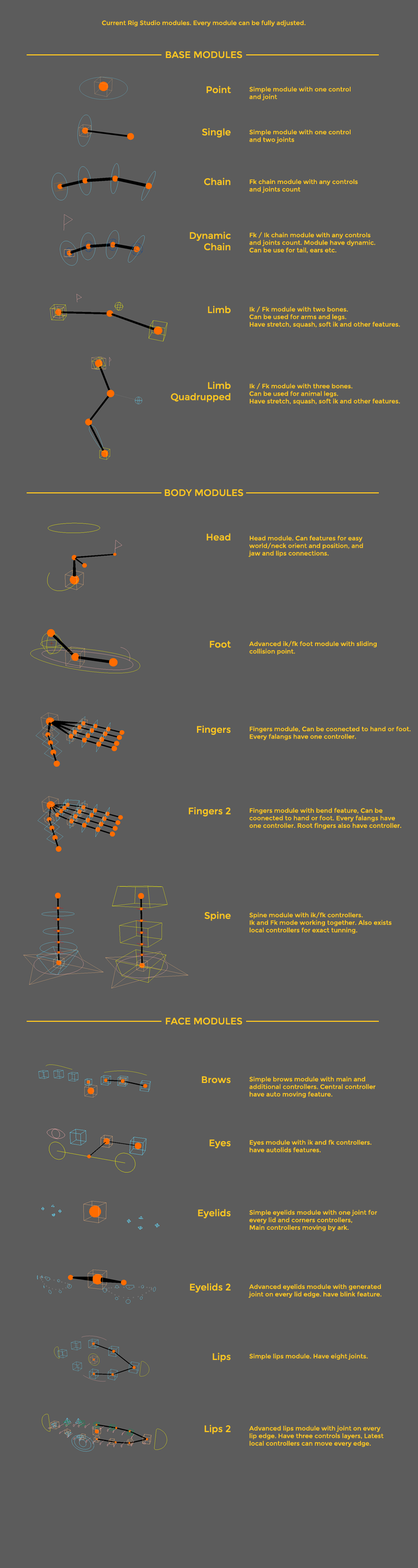
<style>
.page{position:relative;width:418px;height:1568px;background:#5c5c5c}
.page>*{position:absolute;margin:0}
.t1{font:6.3px "Montserrat-Regular";color:#ffc820}
.t2{font:9.4px "Montserrat-Regular";color:#ffc820}
</style>
<div class="page">
<p class="t1" style="left:102px;top:20px;width:204px;height:7px">Current Rig Studio modules. Every module can be fully adjusted.</p>
<p class="t2" style="left:166px;top:51px;width:77px;height:8px">BASE MODULES</p>
<p class="t2" style="left:206px;top:86px;width:25px;height:8px">Point</p>
<p class="t1" style="left:249px;top:86px;width:102px;height:14px">Simple module with one control <br>and joint</p>
<p class="t2" style="left:202px;top:128px;width:29px;height:9px">Single</p>
<p class="t1" style="left:249px;top:129px;width:102px;height:14px">Simple module with one control <br>and two joints</p>
<p class="t2" style="left:204px;top:178px;width:26px;height:8px">Chain</p>
<p class="t1" style="left:249px;top:179px;width:109px;height:14px">Fk chain module with any controls<br>and joints count</p>
<p class="t2" style="left:190px;top:232px;width:41px;height:18px;text-align:right">Dynamic<br>Chain</p>
<p class="t1" style="left:249px;top:232px;width:127px;height:21px">Fk / Ik chain module with any controls<br>and joints count. Module have dynamic.<br>Can be use for tail, ears etc.</p>
<p class="t2" style="left:208px;top:306px;width:23px;height:8px">Limb</p>
<p class="t1" style="left:249px;top:306px;width:151px;height:22px">Ik / Fk module with two bones. <br>Can be used for arms and legs.<br>Have stretch, squash, soft ik and other features.</p>
<p class="t2" style="left:171px;top:382px;width:60px;height:20px;text-align:right">Limb<br>Quadrupped</p>
<p class="t1" style="left:249px;top:383px;width:151px;height:22px">Ik / Fk module with three bones. <br>Can be used for animal legs.<br>Have stretch, squash, soft ik and other features.</p>
<p class="t2" style="left:165px;top:489px;width:79px;height:8px">BODY MODULES</p>
<p class="t2" style="left:206px;top:533px;width:24px;height:8px">Head</p>
<p class="t1" style="left:248px;top:535px;width:115px;height:22px">Head module. Can features for easy<br>world/neck orient and position, and <br>jaw and lips connections.</p>
<p class="t2" style="left:210px;top:641px;width:21px;height:7px">Foot</p>
<p class="t1" style="left:249px;top:641px;width:128px;height:14px">Advanced ik/fk foot module with sliding<br>collision point.</p>
<p class="t2" style="left:197px;top:725px;width:34px;height:10px">Fingers</p>
<p class="t1" style="left:250px;top:726px;width:161px;height:14px">Fingers module, Can be coonected to hand or foot.<br>Every falangs have one controller.</p>
<p class="t2" style="left:189px;top:807px;width:42px;height:9px">Fingers 2</p>
<p class="t1" style="left:249px;top:808px;width:152px;height:21px">Fingers module with bend feature, Can be <br>coonected to hand or foot. Every falangs have <br>one controller. Root fingers also have controller.</p>
<p class="t2" style="left:204px;top:912px;width:27px;height:9px">Spine</p>
<p class="t1" style="left:249px;top:912px;width:143px;height:22px">Spine module with ik/fk controllers. <br>Ik and Fk mode working together. Also exists<br>local controllers for exact tunning.</p>
<p class="t2" style="left:166px;top:1018px;width:77px;height:7px">FACE MODULES</p>
<p class="t2" style="left:202px;top:1076px;width:29px;height:7px">Brows</p>
<p class="t1" style="left:249px;top:1076px;width:127px;height:22px">Simple brows module with main and <br>additional controllers. Central controller<br>have auto moving feature.</p>
<p class="t2" style="left:210px;top:1139px;width:21px;height:9px">Eyes</p>
<p class="t1" style="left:249px;top:1139px;width:123px;height:13px">Eyes module with ik and fk controllers.<br>have autolids features.</p>
<p class="t2" style="left:198px;top:1209px;width:33px;height:9px">Eyelids</p>
<p class="t1" style="left:249px;top:1209px;width:128px;height:22px">Simple eyelids module with one joint for<br>every lid and corners controllers, <br>Main controllers moving by ark.</p>
<p class="t2" style="left:190px;top:1283px;width:41px;height:10px">Eyelids 2</p>
<p class="t1" style="left:248px;top:1284px;width:134px;height:14px">Advanced eyelids module with generated <br>joint on every lid edge. have blink feature.</p>
<p class="t2" style="left:213px;top:1353px;width:18px;height:9px">Lips</p>
<p class="t1" style="left:249px;top:1353px;width:119px;height:7px">Simple lips module. Have eight joints.</p>
<p class="t2" style="left:204px;top:1425px;width:27px;height:9px">Lips 2</p>
<p class="t1" style="left:249px;top:1425px;width:135px;height:22px">Advanced lips module with joint on every<br>lip edge. Have three controls layers, Latest <br>local controllers can move every edge.</p>
</div>
